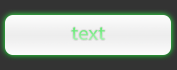
<style>
.page{position:relative;width:177px;height:70px;background:#333333}
.page>*{position:absolute;margin:0}
.t1{font:12px "MyriadPro-Regular";color:#81ed8d}
</style>
<div class="page">
<p class="t1" style="left:71px;top:27px;width:34px;height:13px">text</p>
</div>
